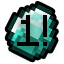
<style>
.page{position:relative;width:64px;height:64px;background:#ffffff}
.page>*{position:absolute;margin:0}
.t1{font:35.4px "Minecraftia-Regular";color:#000000}
</style>
<div class="page">
<p class="t1" style="left:17px;top:15px;width:30px;height:31px">1!</p>
</div>
